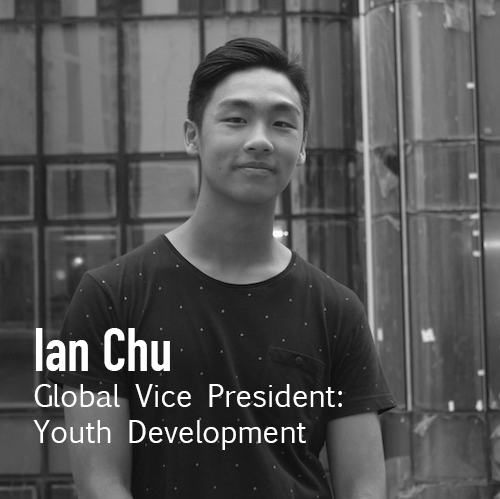
<style>
.page{position:relative;width:500px;height:499px}
.page>*{position:absolute;margin:0}
.t1{font:30px "EuphemiaUCAS";color:#ffffff}
.t2{font:60px "DINCondensed-Bold";color:#ffffff}
</style>
<div class="page">
<p class="t1" style="left:33px;top:328px;width:309px;height:122px"><span class="t2">Ian Chu<br></span>Global Vice President:<br>Youth Development</p>
</div>
